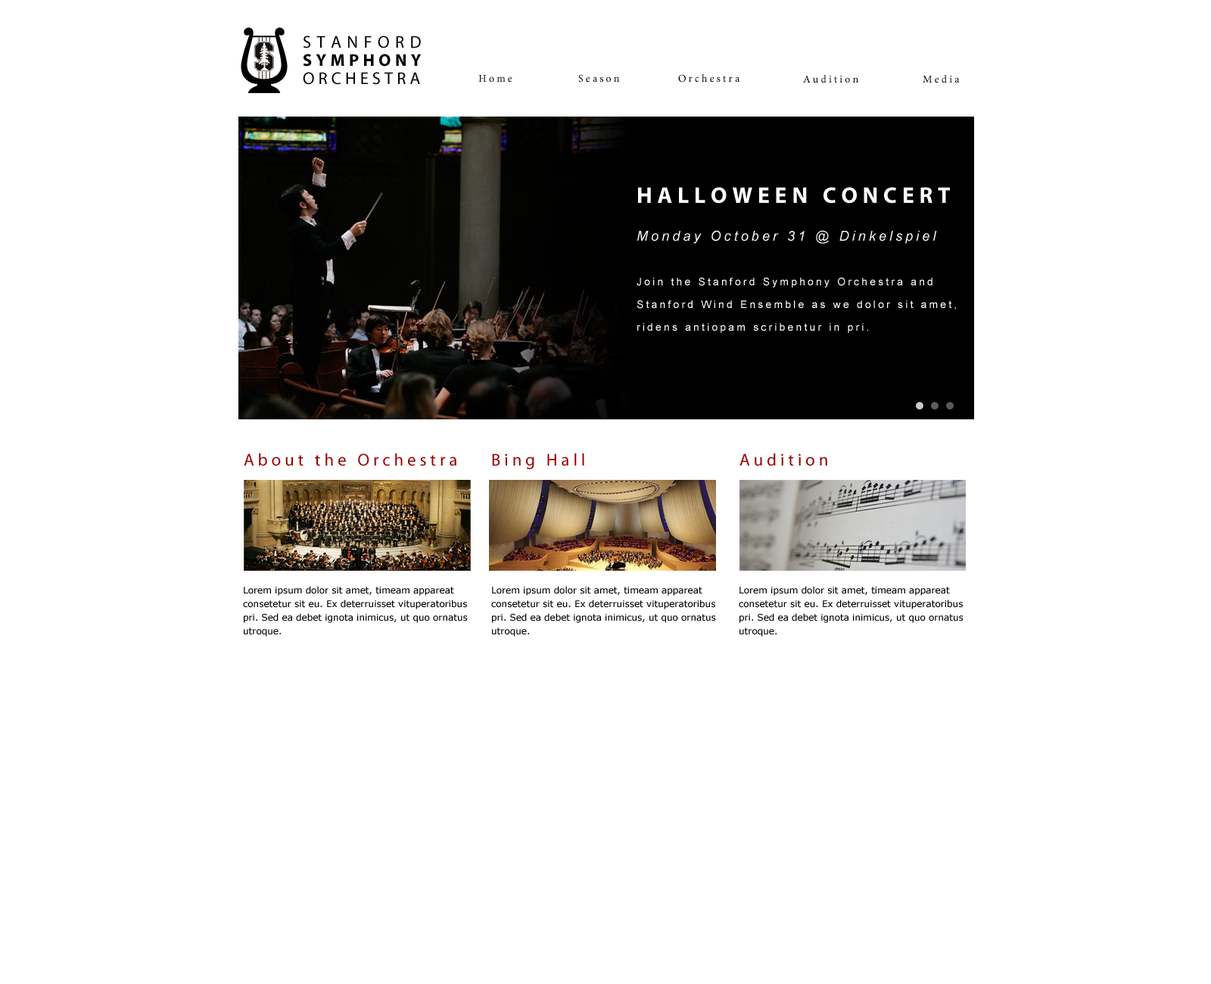
<style>
.page{position:relative;width:1211px;height:984px;background:#ffffff}
.page>*{position:absolute;margin:0}
.t1{font:10.6px "MinionPro-Regular";letter-spacing:0.226em;color:#000000}
.t2{font:10.6px/22.7px "ArialMT";letter-spacing:0.226em;color:#ffffff}
.t3{font:22.7px "MyriadPro-Bold";letter-spacing:0.226em;color:#ffffff}
.t4{font:13.6px "Arial-ItalicMT";letter-spacing:0.226em;color:#ffffff}
.t5{font:17px "MyriadPro-Regular";letter-spacing:0.226em;color:#990000}
.t6{font:9.1px/13.6px "Verdana";color:#000000}
</style>
<div class="page">
<p class="t1" style="left:479px;top:75px;width:34px;height:8px">Home</p>
<p class="t1" style="left:578px;top:74px;width:42px;height:9px">Season</p>
<p class="t1" style="left:678px;top:74px;width:62px;height:9px">Orchestra</p>
<p class="t1" style="left:803px;top:75px;width:56px;height:8px">Audition</p>
<p class="t1" style="left:923px;top:75px;width:37px;height:8px">Media</p>
<p class="t2" style="left:637px;top:187px;width:319px;height:146px"><span class="t3">HALLOWEEN CONCERT<br><br></span><span class="t4">Monday October 31 @ Dinkelspiel<br><br><br></span>Join the Stanford Symphony Orchestra and <br>Stanford Wind Ensemble as we dolor sit amet,<br>ridens antiopam scribentur in pri.</p>
<p class="t5" style="left:244px;top:454px;width:213px;height:12px">About the Orchestra</p>
<p class="t5" style="left:492px;top:454px;width:93px;height:15px">Bing Hall</p>
<p class="t5" style="left:740px;top:454px;width:88px;height:12px">Audition</p>
<p class="t6" style="left:243px;top:586px;width:225px;height:51px">Lorem ipsum dolor sit amet, timeam appareat<br>consetetur sit eu. Ex deterruisset vituperatoribus<br>pri. Sed ea debet ignota inimicus, ut quo ornatus<br>utroque.</p>
<p class="t6" style="left:491px;top:586px;width:225px;height:51px">Lorem ipsum dolor sit amet, timeam appareat<br>consetetur sit eu. Ex deterruisset vituperatoribus<br>pri. Sed ea debet ignota inimicus, ut quo ornatus<br>utroque.</p>
<p class="t6" style="left:739px;top:586px;width:225px;height:51px">Lorem ipsum dolor sit amet, timeam appareat<br>consetetur sit eu. Ex deterruisset vituperatoribus<br>pri. Sed ea debet ignota inimicus, ut quo ornatus<br>utroque.</p>
</div>
